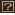
<style>
.page{position:relative;width:15px;height:15px}
.page>*{position:absolute;margin:0}
.t1{font:9px "Kartika";color:#b3aba4;scale:1.88 1}
</style>
<div class="page">
<p class="t1" style="left:3px;top:3px;width:9px;height:7px">?</p>
</div>
